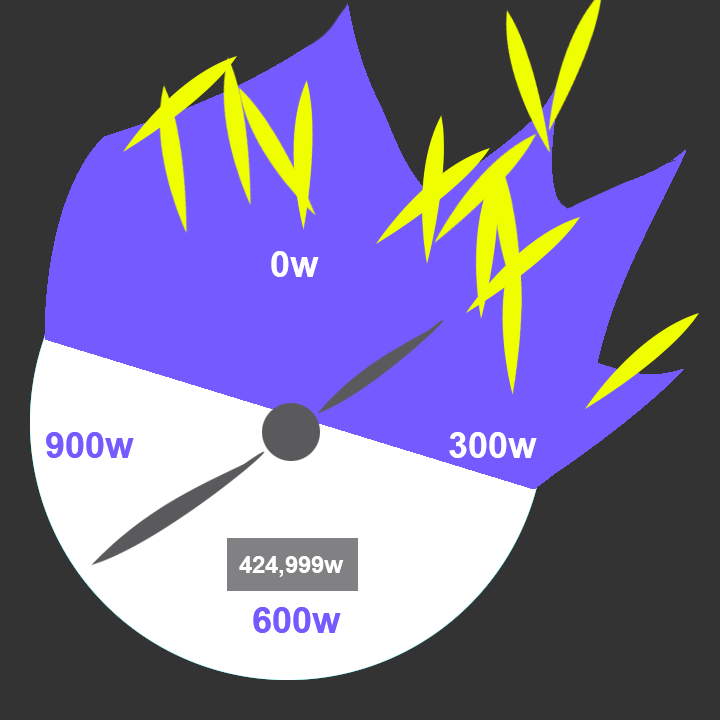
<style>
.page{position:relative;width:720px;height:720px;background:#333333}
.page>*{position:absolute;margin:0}
.t1{font:36px "Arial-BoldMT";color:#fefefe}
.t2{font:36px "Arial-BoldMT";color:#755bff}
.t3{font:24px "Arial-BoldMT";color:#ffffff}
</style>
<div class="page">
<p class="t1" style="left:271px;top:251px;width:48px;height:26px">0w</p>
<p class="t2" style="left:46px;top:432px;width:88px;height:26px">900w</p>
<p class="t1" style="left:449px;top:432px;width:88px;height:26px">300w</p>
<p class="t3" style="left:239px;top:556px;width:105px;height:21px">424,999w</p>
<p class="t2" style="left:253px;top:607px;width:88px;height:26px">600w</p>
</div>
